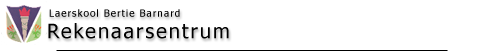
<style>
.page{position:relative;width:500px;height:53px;background:#ffffff}
.page>*{position:absolute;margin:0}
.t1{font:10px "Tahoma";letter-spacing:0.1em;color:#000000}
.t2{font:20px "Tahoma";letter-spacing:0.1em;color:#000000}
</style>
<div class="page">
<p class="t1" style="left:49px;top:9px;width:131px;height:8px">Laerskool Bertie Barnard</p>
<p class="t2" style="left:48px;top:23px;width:181px;height:16px">Rekenaarsentrum</p>
</div>
